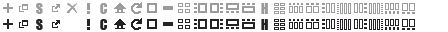
<style>
.page{position:relative;width:448px;height:32px;background:#ffffff}
.page>*{position:absolute;margin:0}
.t1{font:14px "Impact";color:#9b9b9b}
.t2{font:14px "Impact";color:#242224}
</style>
<div class="page">
<p class="t1" style="left:36px;top:3px;width:7px;height:11px">S</p>
<p class="t1" style="left:100px;top:3px;width:7px;height:11px">C</p>
<p class="t1" style="left:261px;top:3px;width:7px;height:11px">H</p>
<p class="t2" style="left:36px;top:19px;width:7px;height:11px">S</p>
<p class="t2" style="left:100px;top:19px;width:7px;height:11px">C</p>
<p class="t2" style="left:261px;top:19px;width:7px;height:11px">H</p>
</div>
